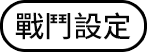
<style>
.page{position:relative;width:147px;height:52px;background:#ffffff}
.page>*{position:absolute;margin:0}
.t1{font:29.2px "NotoSansCJKtc-Medium";color:#060606}
</style>
<div class="page">
<p class="t1" style="left:15px;top:12px;width:116px;height:28px">戰鬥設定</p>
</div>
